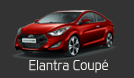
<style>
.page{position:relative;width:134px;height:78px;background:#333333}
.page>*{position:absolute;margin:0}
.t1{font:13.5px "ModernH-Light";letter-spacing:-0.025em;color:#f3f3f0}
</style>
<div class="page">
<p class="t1" style="left:29px;top:59px;width:79px;height:14px">Elantra Coupé</p>
</div>
